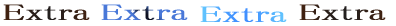
<style>
.page{position:relative;width:396px;height:26px;background:#ffffff}
.page>*{position:absolute;margin:0}
.t1{font:22.8px "MS-PMincho";color:#332016;font-weight:bold;scale:1.63 1}
.t2{font:22.8px "MS-PMincho";color:#4978d8;font-weight:bold;scale:1.63 1}
.t3{font:22.8px "MS-PMincho";font-weight:bold;scale:1.63 1}
</style>
<div class="page">
<p class="t1" style="left:3px;top:4px;width:87px;height:16px">Extra</p>
<p class="t2" style="left:101px;top:4px;width:87px;height:16px">Extra</p>
<p class="t3" style="left:200px;top:6px;width:87px;height:16px">Extra</p>
<p class="t1" style="left:299px;top:4px;width:87px;height:16px">Extra</p>
</div>
